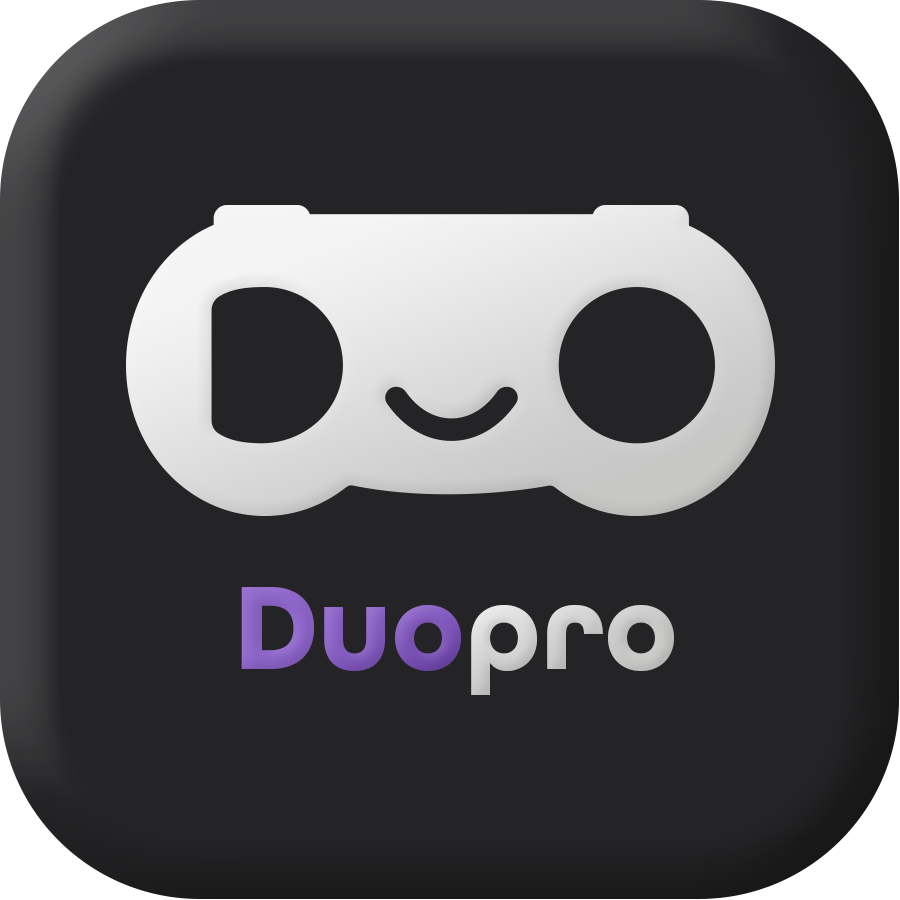
<style>
.page{position:relative;width:900px;height:900px;background:#242426}
.page>*{position:absolute;margin:0}
.t1{font:125px "AllRoundGothic-Bold"}
</style>
<div class="page">
<p class="t1" style="left:241px;top:587px;width:433px;height:108px">Duopro</p>
</div>
